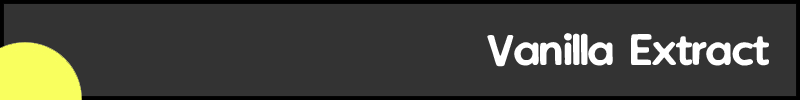
<style>
.page{position:relative;width:800px;height:100px;background:#333333}
.page>*{position:absolute;margin:0}
.t1{font:36px "VanillaExtractRegular";color:#ffffff}
</style>
<div class="page">
<p class="t1" style="left:487px;top:33px;width:282px;height:34px">Vanilla Extract</p>
</div>
